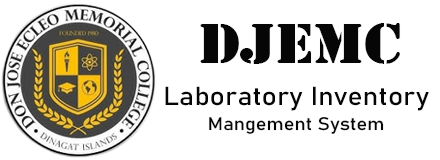
<style>
.page{position:relative;width:440px;height:160px;background:#ffffff}
.page>*{position:absolute;margin:0}
.t1{font:59.4px "Stencil";color:#060606;scale:1.09 1}
.t2{font:25.8px "Bahnschrift";color:#060606;scale:1.1 1}
.t3{font:18px "Bahnschrift";color:#060606;scale:1.11 1}
</style>
<div class="page">
<p class="t1" style="left:200px;top:23px;width:200px;height:41px">DJEMC</p>
<p class="t2" style="left:165px;top:86px;width:264px;height:25px">Laboratory Inventory</p>
<p class="t3" style="left:209px;top:117px;width:175px;height:17px">Mangement System</p>
</div>
